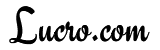
<style>
.page{position:relative;width:160px;height:50px;background:#ffffff}
.page>*{position:absolute;margin:0}
.t1{font:50px "Engagement-Regular";color:#000000}
</style>
<div class="page">
<p class="t1" style="left:9px;top:6px;width:141px;height:39px">Lucro.com</p>
</div>
